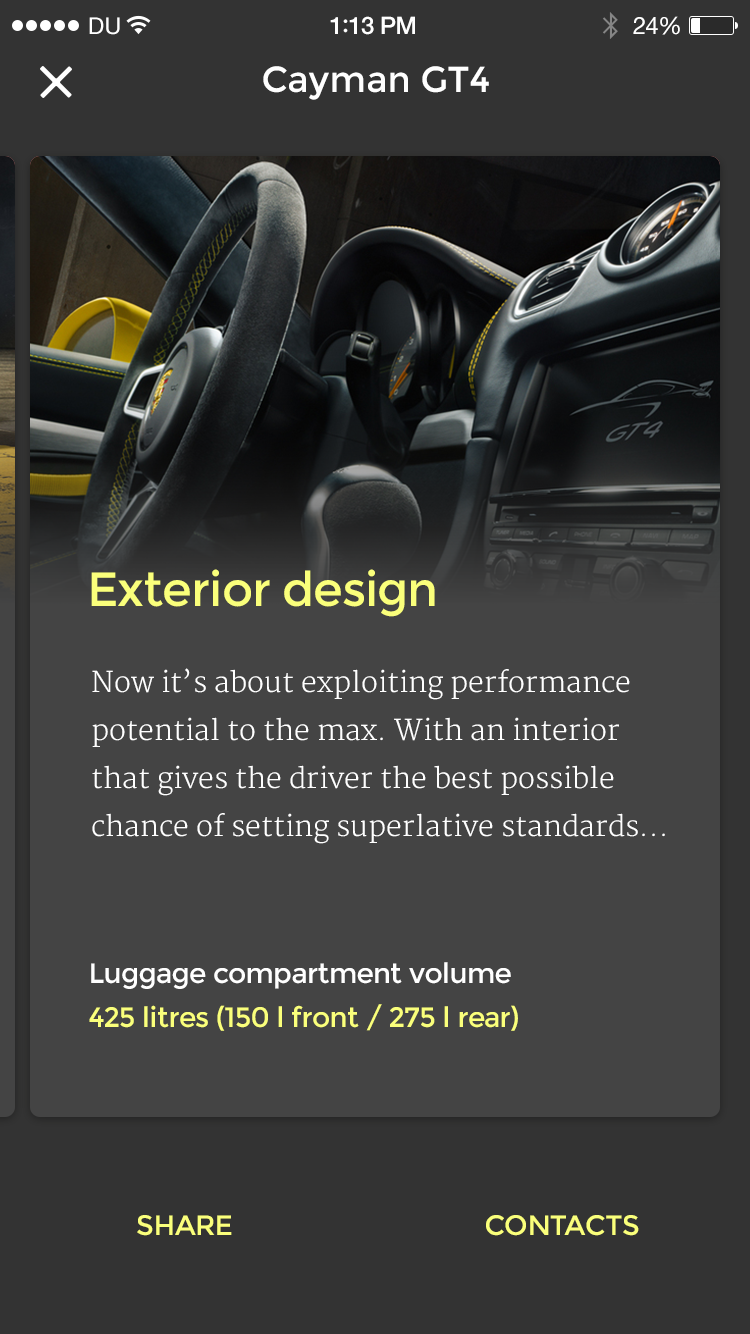
<style>
.page{position:relative;width:750px;height:1334px;background:#444444}
.page>*{position:absolute;margin:0}
.t1{font:23px "HelveticaNeue";letter-spacing:0.02em;color:#ffffff}
.t2{font:24px "HelveticaNeue-Medium";letter-spacing:-0.02em;color:#ffffff}
.t3{font:26px "Avenir-Medium";letter-spacing:-0.02em;color:#ffffff}
.t4{font:24px "HelveticaNeue";letter-spacing:-0.02em;color:#ffffff}
.t5{font:36px "Montserrat-Regular";color:#ffffff}
.t6{font:48px "Montserrat-Regular";letter-spacing:-0.02em;color:#faff7b}
.t7{font:28px/48px "Merriweather-Light";color:#ffffff}
.t8{font:28px "Montserrat-Regular";letter-spacing:-0.02em;color:#ffffff}
.t9{font:28px "Montserrat-Regular";letter-spacing:-0.02em;color:#faff7b}
.t10{font:28px "Montserrat-Regular";letter-spacing:-0.02em;color:#faff7b;text-transform:uppercase}
</style>
<div class="page">
<p class="t1" style="left:89px;top:17px;width:31px;height:18px">DU</p>
<p class="t2" style="left:330px;top:16px;width:85px;height:19px">1<span class="t3">:</span>13 PM</p>
<p class="t4" style="left:633px;top:16px;width:47px;height:19px">24%</p>
<p class="t5" style="left:263px;top:66px;width:226px;height:34px">Cayman GT4</p>
<p class="t6" style="left:91px;top:569px;width:344px;height:48px">Exterior design</p>
<p class="t7" style="left:92px;top:668px;width:573px;height:176px">Now it’s about exploiting performance potential to the max. With an interior that gives the driver the best possible chance of setting superlative standards...</p>
<p class="t8" style="left:91px;top:962px;width:420px;height:27px">Luggage compartment volume</p>
<p class="t9" style="left:89px;top:1004px;width:429px;height:27px">425 litres (150 l front / 275 l rear)</p>
<p class="t10" style="left:137px;top:1215px;width:95px;height:21px">Share</p>
<p class="t10" style="left:486px;top:1215px;width:153px;height:21px">contacts</p>
</div>
